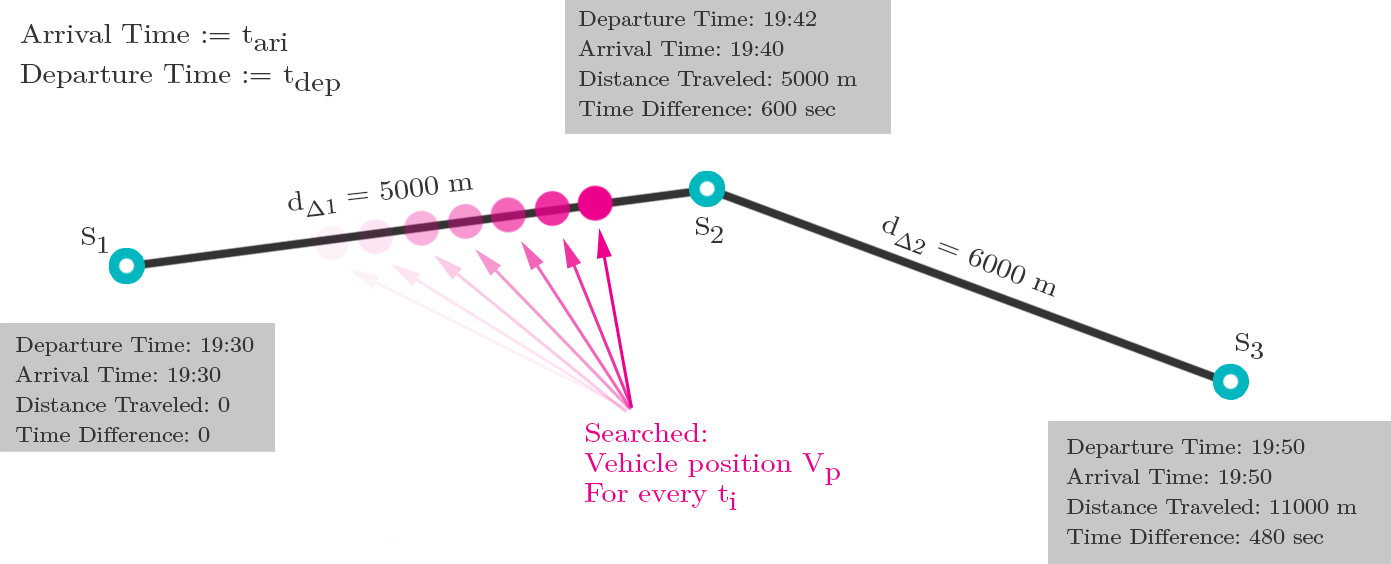
<style>
.page{position:relative;width:1391px;height:564px;background:#ffffff}
.page>*{position:absolute;margin:0}
.t1{font:21.6px/30px "LMMath-Regular";color:#333333;scale:1.11 1}
.t2{font:27px/40px "LMMath-Regular";color:#333333;scale:1.11 1}
.t3{font:27px "LMMath-Regular";color:#333333;scale:1.11 1}
.t4{font:21.6px "LMMath-Regular";color:#333333;scale:1.11 1}
.t5{font:25.2px "LMMath-Regular";color:#333333;scale:1.11 1}
.t6{font:27px/30px "LMMath-Regular";color:#ec008c;scale:1.11 1}
</style>
<div class="page">
<p class="t1" style="left:578px;top:11px;width:279px;height:105px">Departure Time: 19:42<br>Arrival Time: 19:40<br>Distance Traveled: 5000 m<br>Time Difference: 600 sec</p>
<p class="t2" style="left:20px;top:24px;width:320px;height:73px">Arrival Time := tari<br>Departure Time := tdep</p>
<p class="t3" style="left:288px;top:176px;width:186px;height:41px;rotate:-6deg">d<span class="t4">∆1</span> = 5000 m</p>
<p class="t5" style="left:696px;top:217px;width:27px;height:26px">S2</p>
<p class="t3" style="left:882px;top:216px;width:173px;height:81px;rotate:21deg">d<span class="t4">∆2</span> = 6000 m</p>
<p class="t5" style="left:82px;top:227px;width:26px;height:26px">S1</p>
<p class="t1" style="left:15px;top:337px;width:239px;height:105px">Departure Time: 19:30<br>Arrival Time: 19:30<br>Distance Traveled: 0<br>Time Difference: 0</p>
<p class="t5" style="left:1236px;top:333px;width:27px;height:26px">S3</p>
<p class="t6" style="left:584px;top:423px;width:256px;height:87px">Searched:<br>Vehicle position Vp<br>For every ti</p>
<p class="t1" style="left:1066px;top:439px;width:291px;height:105px">Departure Time: 19:50<br>Arrival Time: 19:50<br>Distance Traveled: 11000 m<br>Time Difference: 480 sec</p>
</div>
